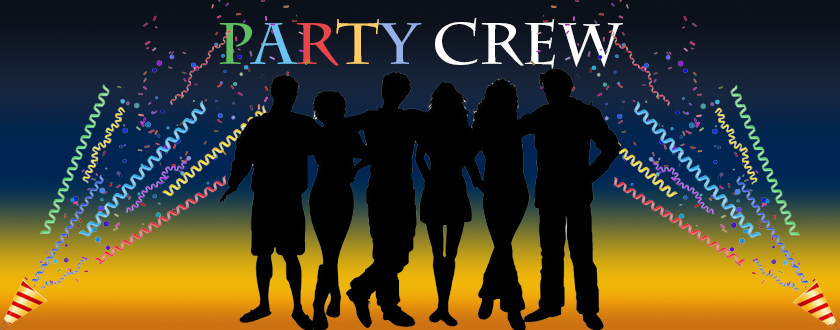
<style>
.page{position:relative;width:840px;height:330px}
.page>*{position:absolute;margin:0}
.t1{font:58.3px "CharlemagneStd-Bold";color:#ffffff}
.t2{font:58.3px "CharlemagneStd-Bold";color:#61bb61}
.t3{font:58.3px "CharlemagneStd-Bold";color:#6ac3f3}
.t4{font:58.3px "CharlemagneStd-Bold";color:#e64749}
.t5{font:58.3px "CharlemagneStd-Bold";color:#ffcc66}
.t6{font:58.3px "CharlemagneStd-Bold";color:#96b1e9}
</style>
<div class="page">
<p class="t1" style="left:219px;top:18px;width:404px;height:51px"><span class="t2">P</span><span class="t3">a</span><span class="t4">r</span><span class="t5">t</span><span class="t6">y </span>Crew</p>
</div>
